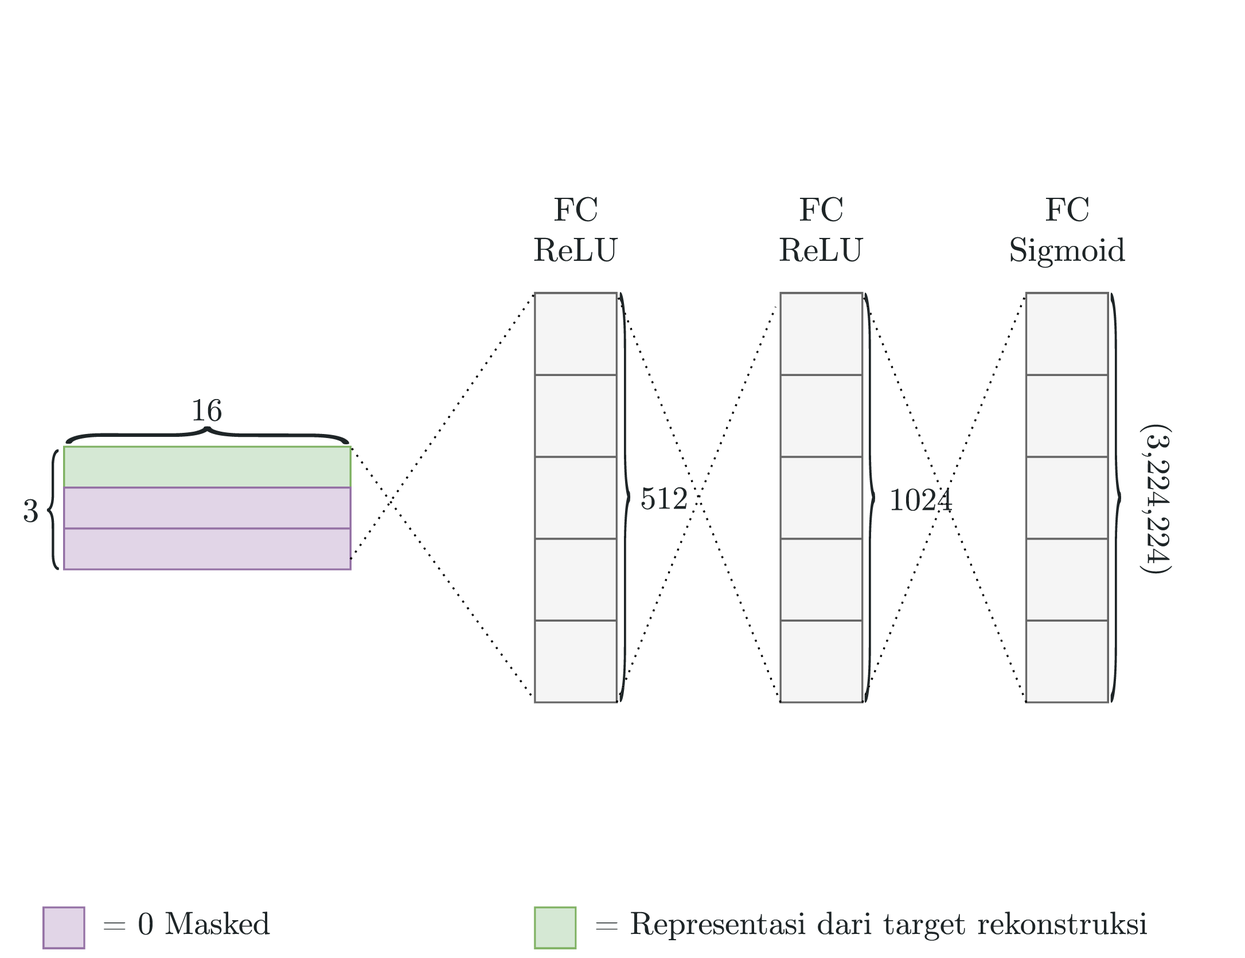
<style>
.page{position:relative;width:1245px;height:958px;background:#ffffff}
.page>*{position:absolute;margin:0}
.t1{font:33.4px "CMUSerif-Roman";color:#1e2527}
.t2{font:410.8px "CMUSerif-Roman";color:#1e2527;scale:0.07 1}
.t3{font:32.1px "CMUSerif-Roman";color:#1e2527}
.t4{font:283.6px "CMUSerif-Roman";color:#1e2527;scale:0.18 1}
.t5{font:120.9px "CMUSerif-Roman";color:#1e2527;scale:0.28 1}
</style>
<div class="page">
<p class="t1" style="left:534px;top:197px;width:84px;height:65px;text-align:center">FC<br>ReLU</p>
<p class="t1" style="left:779px;top:197px;width:84px;height:65px;text-align:center">FC<br>ReLU</p>
<p class="t1" style="left:1010px;top:197px;width:115px;height:71px;text-align:center">FC<br>Sigmoid</p>
<p class="t2" style="left:619px;top:292px;width:11px;height:410px">}</p>
<p class="t2" style="left:864px;top:292px;width:11px;height:411px">}</p>
<p class="t2" style="left:1110px;top:292px;width:11px;height:411px">}</p>
<p class="t3" style="left:193px;top:399px;width:28px;height:22px">16</p>
<p class="t4" style="left:65px;top:426px;width:284px;height:18px;rotate:90deg">{</p>
<p class="t3" style="left:1139px;top:424px;width:33px;height:150px;rotate:90deg">(3,224,224)</p>
<p class="t5" style="left:46px;top:449px;width:13px;height:121px;rotate:178deg">}</p>
<p class="t3" style="left:641px;top:487px;width:46px;height:23px">512</p>
<p class="t3" style="left:891px;top:488px;width:61px;height:23px">1024</p>
<p class="t1" style="left:24px;top:499px;width:14px;height:23px">3</p>
<p class="t3" style="left:104px;top:912px;width:166px;height:23px">= 0 Masked</p>
<p class="t3" style="left:596px;top:912px;width:551px;height:29px">= Representasi dari target rekonstruksi</p>
</div>
